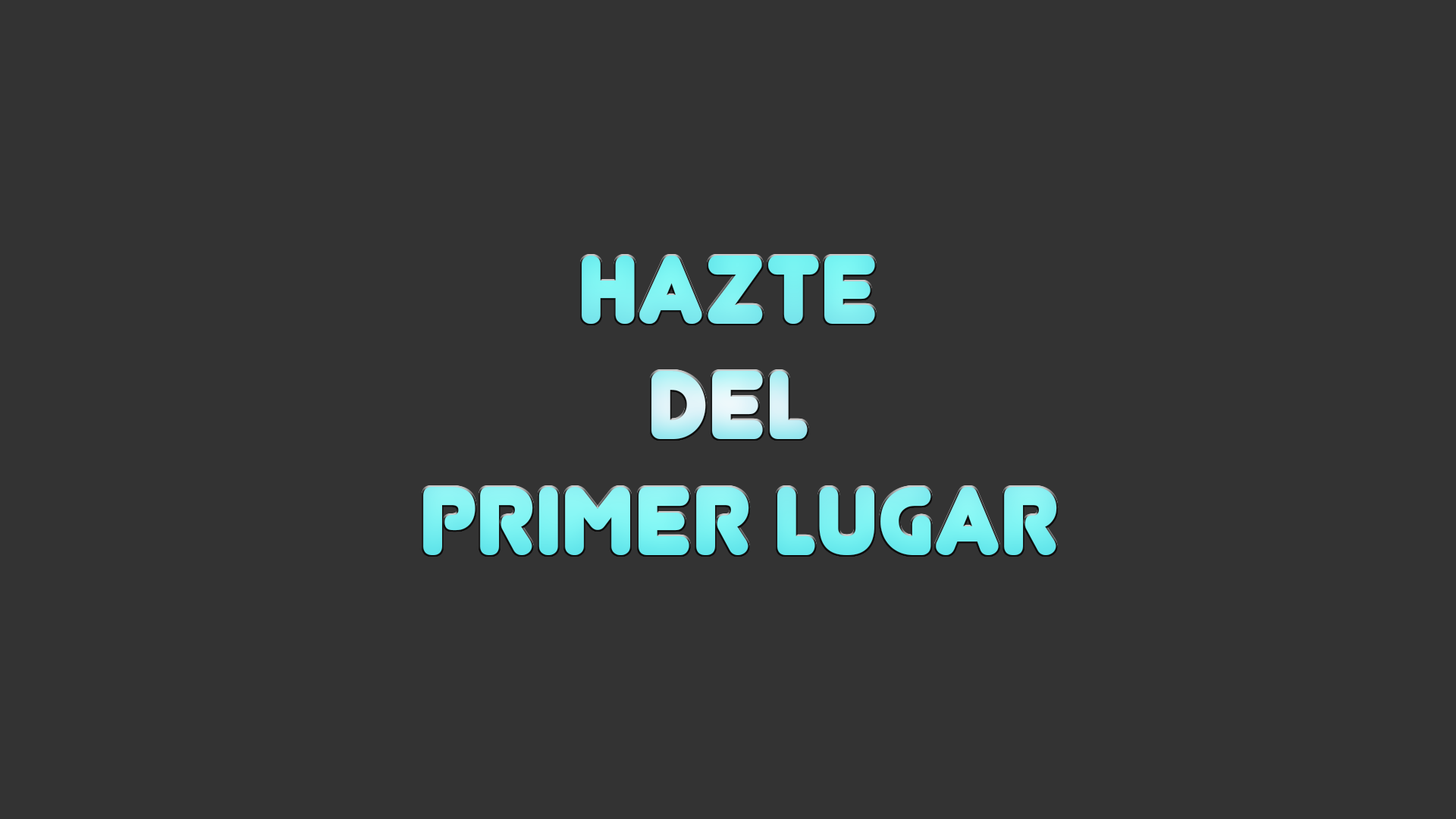
<style>
.page{position:relative;width:1456px;height:819px;background:#333333}
.page>*{position:absolute;margin:0}
.t1{font:96.3px "Junegull-Regular";color:#81f2f2}
</style>
<div class="page">
<p class="t1" style="left:423px;top:256px;width:634px;height:299px;text-align:center">hazte<br>del<br> primer Lugar</p>
</div>
